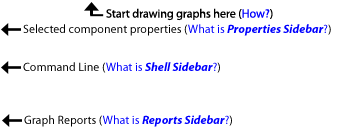
<style>
.page{position:relative;width:360px;height:137px;background:#ffffff}
.page>*{position:absolute;margin:0}
.t1{font:12px "MyriadPro-Regular";color:#000000}
.t2{font:12px "MyriadPro-Regular";color:#0000ff}
.t3{font:12px "MyriadPro-BoldIt";color:#0000ff}
</style>
<div class="page">
<p class="t1" style="left:106px;top:8px;width:167px;height:13px">Start drawing graphs here (<span class="t2">How?</span>)</p>
<p class="t1" style="left:23px;top:24px;width:308px;height:12px">Selected component properties (<span class="t2">What is </span><span class="t3">Properties Sidebar</span><span class="t2">?</span>)</p>
<p class="t1" style="left:23px;top:62px;width:197px;height:11px">Command Line (<span class="t2">What is </span><span class="t3">Shell Sidebar</span><span class="t2">?</span>)</p>
<p class="t1" style="left:24px;top:115px;width:208px;height:12px">Graph Reports (<span class="t2">What is </span><span class="t3">Reports Sidebar</span><span class="t2">?</span>)</p>
</div>
